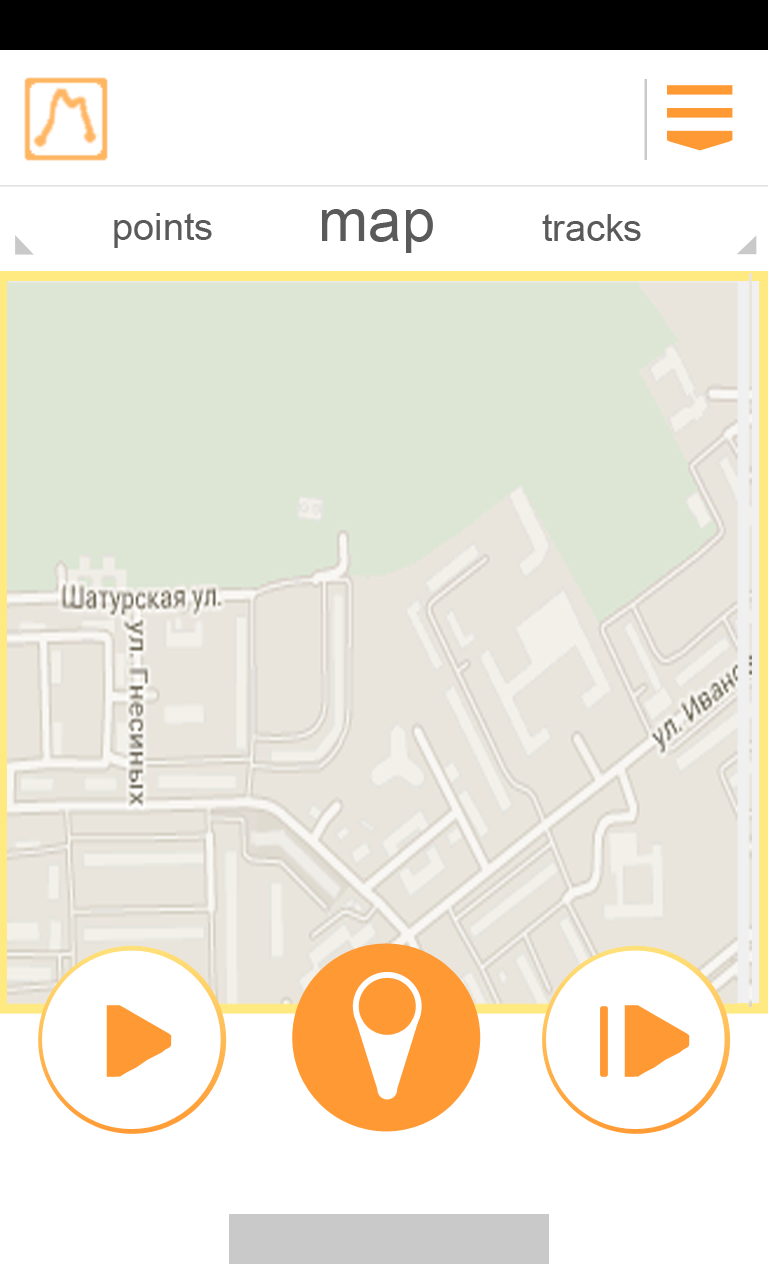
<style>
.page{position:relative;width:768px;height:1280px;background:#ffffff}
.page>*{position:absolute;margin:0}
.t1{font:60.4px "ArialMT";color:#5a5a5a}
.t2{font:37.7px "ArialMT";color:#5a5a5a}
</style>
<div class="page">
<p class="t1" style="left:322px;top:209px;width:111px;height:44px">map</p>
<p class="t2" style="left:114px;top:213px;width:98px;height:35px">points</p>
<p class="t2" style="left:542px;top:214px;width:99px;height:27px">tracks</p>
</div>
